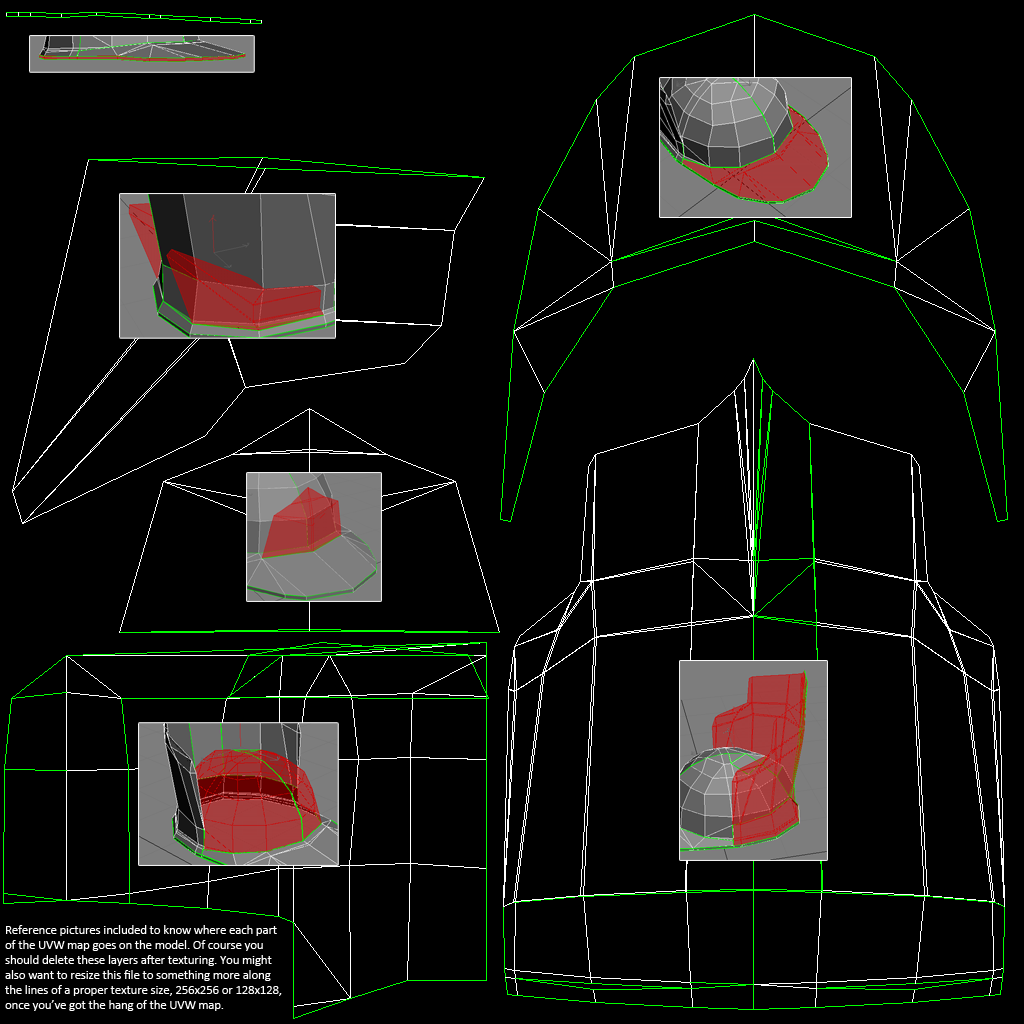
<style>
.page{position:relative;width:1024px;height:1024px;background:#000000}
.page>*{position:absolute;margin:0}
.t1{font:12.5px "Calibri";color:#ffffff}
</style>
<div class="page">
<p class="t1" style="left:5px;top:925px;width:277px;height:86px">Reference pictures included to know where each part<br>of the UVW map goes on the model. Of course you<br>should delete these layers after texturing. You might<br>also want to resize this file to something more along<br>the lines of a proper texture size, 256x256 or 128x128,<br>once you’ve got the hang of the UVW map.</p>
</div>
